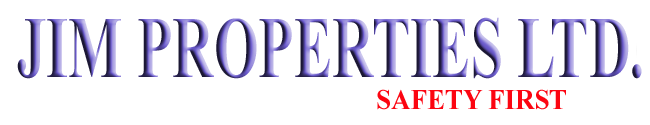
<style>
.page{position:relative;width:650px;height:125px;background:#ffffff}
.page>*{position:absolute;margin:0}
.t1{font:87.2px "TimesNewRomanPS-BoldMT";scale:0.66 1}
.t2{font:28.8px "TimesNewRomanPS-BoldMT";color:#fc0511;scale:0.93 1}
</style>
<div class="page">
<p class="t1" style="left:17px;top:17px;width:625px;height:62px">JIM PROPERTIES LTD.</p>
<p class="t2" style="left:377px;top:89px;width:189px;height:21px">SAFETY FIRST</p>
</div>
